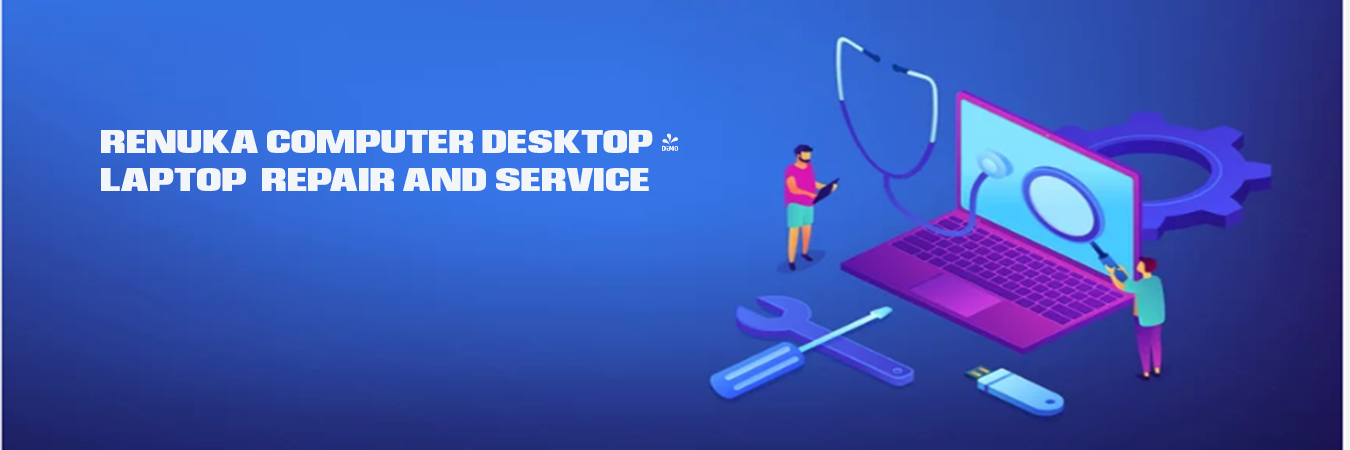
<style>
.page{position:relative;width:1350px;height:450px}
.page>*{position:absolute;margin:0}
.t1{font:32px "FONTSPRINGDEMO-EurocineBlackRegular";color:#f3f6f8}
</style>
<div class="page">
<p class="t1" style="left:101px;top:130px;width:577px;height:61px">RENUKA COMPUTER DESKTOP &amp; LAPTOP  REPAIR AND SERVICE</p>
</div>
